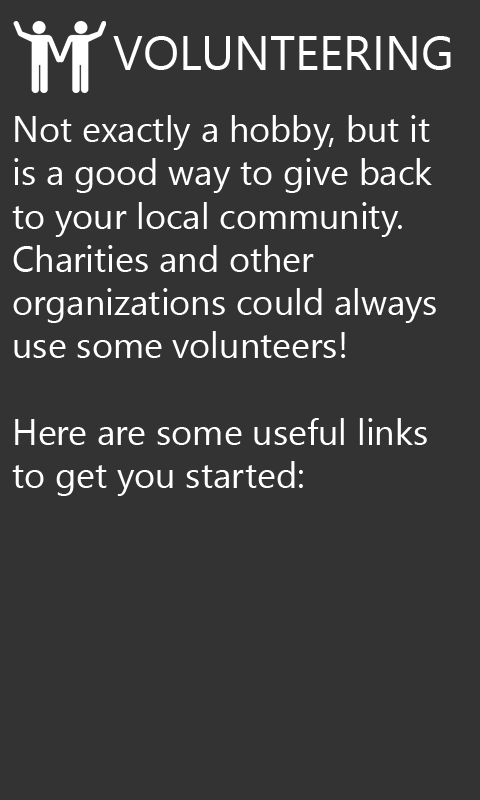
<style>
.page{position:relative;width:480px;height:800px;background:#333333}
.page>*{position:absolute;margin:0}
.t1{font:48px "SegoeUIHistoric";color:#ffffff}
.t2{font:36px "SegoeUIHistoric";color:#ffffff}
</style>
<div class="page">
<p class="t1" style="left:113px;top:36px;width:338px;height:34px">VOLUNTEERING</p>
<p class="t2" style="left:12px;top:115px;width:424px;height:381px">Not exactly a hobby, but it<br>is a good way to give back<br>to your local community.<br>Charities and other<br>organizations could always<br>use some volunteers!<br><br>Here are some useful links<br>to get you started:</p>
</div>
